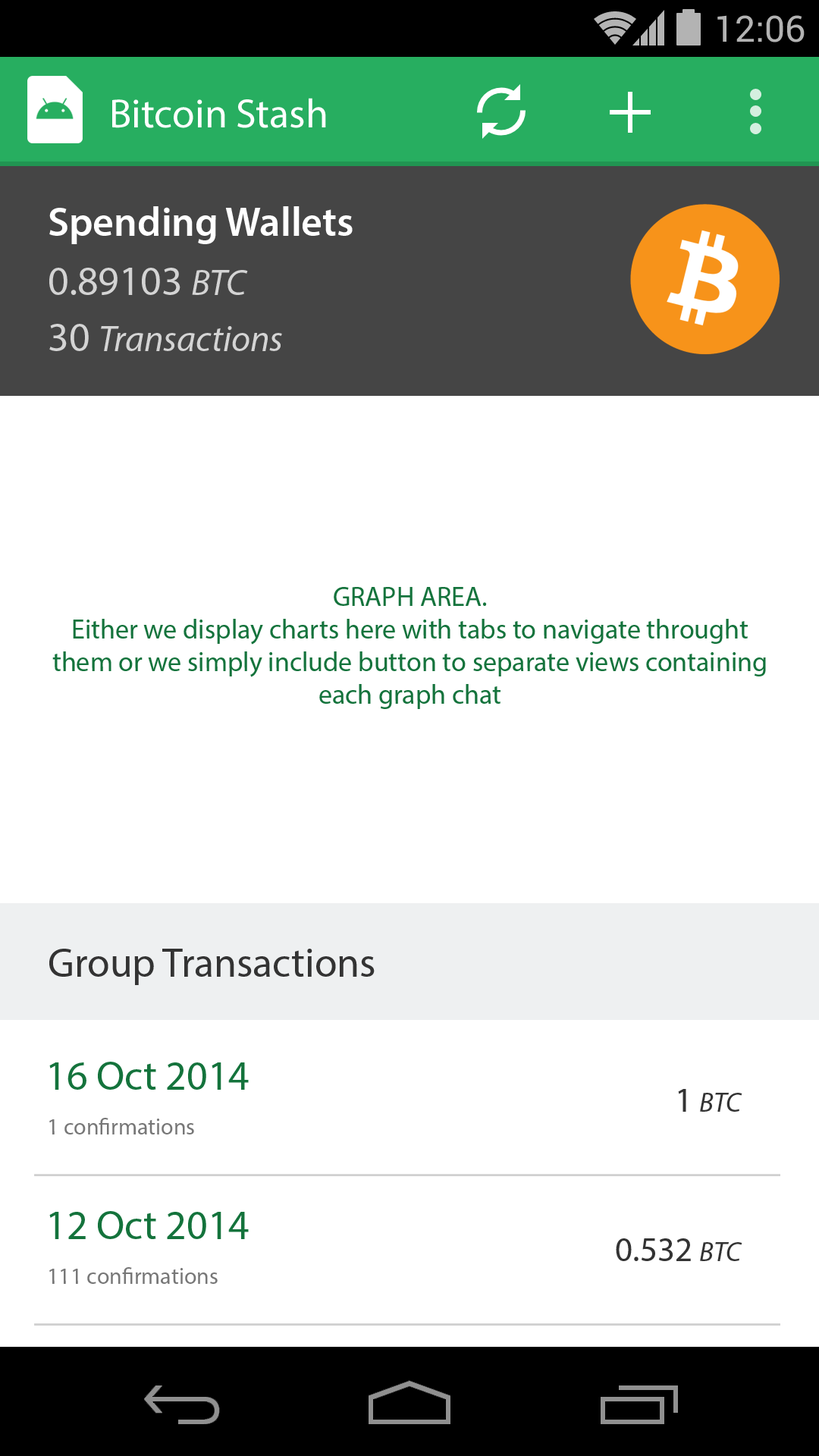
<style>
.page{position:relative;width:819px;height:1456px;background:#ffffff}
.page>*{position:absolute;margin:0}
.t1{font:36.4px "Roboto-Regular";color:#b3b3b3}
.t2{font:40.9px "MyriadPro-Regular";color:#ffffff}
.t3{font:40.9px "MyriadPro-Semibold";color:#ffffff}
.t4{font:40.9px "MyriadPro-Regular";color:#d4d4d4}
.t5{font:36.4px "MyriadPro-It";color:#d4d4d4}
.t6{font:27.3px "MyriadPro-Regular";color:#14733c}
.t7{font:40.9px "MyriadPro-Regular";color:#333333}
.t8{font:40.9px "MyriadPro-Regular";color:#14733c}
.t9{font:27.3px "MyriadPro-It";color:#333333}
.t10{font:34px "MyriadPro-Regular";color:#333333}
.t11{font:22.7px "MyriadPro-Regular";color:#777777}
</style>
<div class="page">
<p class="t1" style="left:717px;top:15px;width:88px;height:27px">12:06</p>
<p class="t2" style="left:112px;top:98px;width:214px;height:30px">Bitcoin Stash</p>
<p class="t3" style="left:49px;top:206px;width:304px;height:38px">Spending Wallets</p>
<p class="t4" style="left:49px;top:268px;width:199px;height:27px">0.89103 <span class="t5">BTC</span></p>
<p class="t5" style="left:49px;top:324px;width:233px;height:27px"><span class="t4">30 </span>Transactions</p>
<p class="t6" style="left:52px;top:587px;width:714px;height:122px;text-align:center">GRAPH AREA.<br>Either we display charts here with tabs to navigate throught them or we simply include button to separate views containing each graph chat</p>
<p class="t7" style="left:49px;top:949px;width:326px;height:36px">Group Transactions</p>
<p class="t8" style="left:49px;top:1062px;width:200px;height:28px">16 Oct 2014</p>
<p class="t9" style="left:678px;top:1089px;width:64px;height:23px"><span class="t10">1 </span>BTC</p>
<p class="t11" style="left:49px;top:1118px;width:145px;height:16px">1 confirmations</p>
<p class="t8" style="left:49px;top:1211px;width:200px;height:28px">12 Oct 2014</p>
<p class="t10" style="left:616px;top:1238px;width:126px;height:23px">0.532 <span class="t9">BTC</span></p>
<p class="t11" style="left:49px;top:1267px;width:169px;height:17px">111 confirmations</p>
</div>
